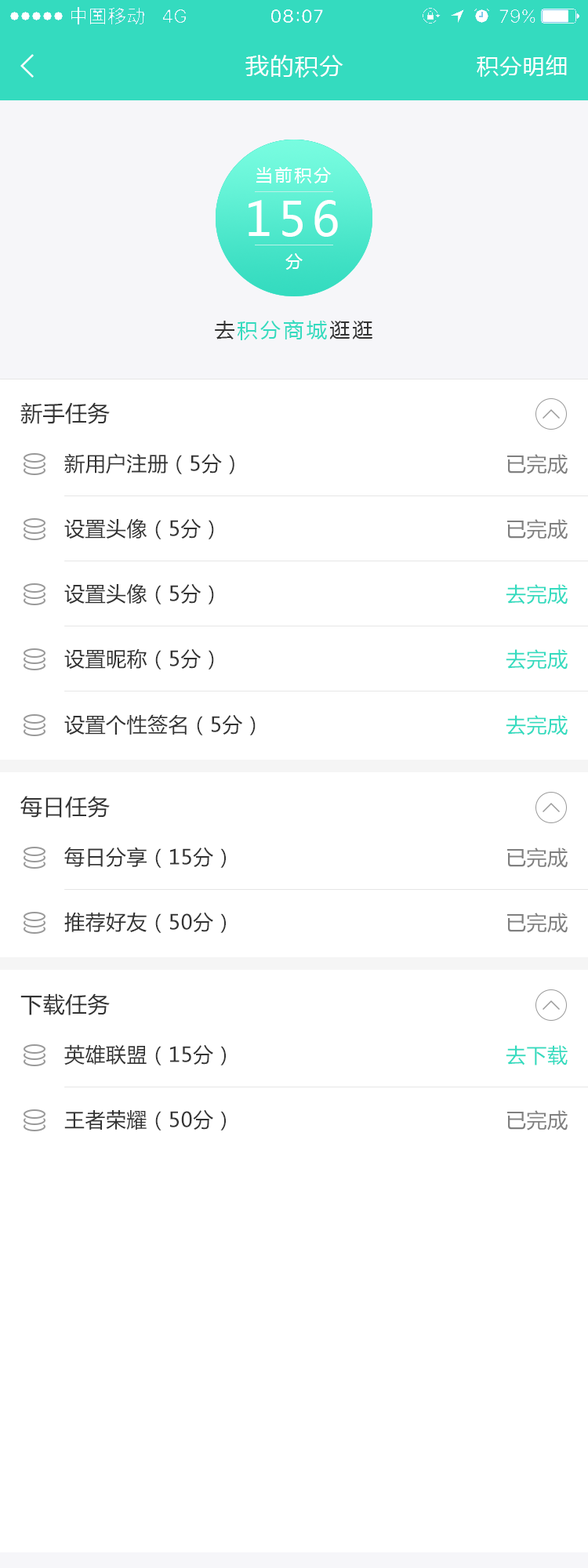
<style>
.page{position:relative;width:588px;height:1568px;background:#ffffff}
.page>*{position:absolute;margin:0}
.t1{font:23.5px "MicrosoftYaHei";letter-spacing:0.05em;color:#ffffff}
.t2{font:22px "MicrosoftYaHei";letter-spacing:0.05em;color:#ffffff}
.t3{font:17.2px "MicrosoftYaHei";letter-spacing:0.13em;color:#ffffff}
.t4{font:47px "MicrosoftYaHei";letter-spacing:0.13em;color:#ffffff}
.t5{font:20.4px "MicrosoftYaHei";letter-spacing:0.13em;color:#34dbbf}
.t6{font:20.4px "MicrosoftYaHei";letter-spacing:0.13em;color:#333333}
.t7{font:22px "MicrosoftYaHei";letter-spacing:0.02em;color:#333333}
.t8{font:20.4px "MicrosoftYaHei";letter-spacing:0.02em;color:#333333}
.t9{font:20.4px "MicrosoftYaHei";letter-spacing:0.02em;color:#808080}
.t10{font:20.4px "MicrosoftYaHei";letter-spacing:0.02em;color:#34dbbf}
</style>
<div class="page">
<p class="t1" style="left:245px;top:55px;width:98px;height:23px">我的积分</p>
<p class="t2" style="left:477px;top:55px;width:90px;height:22px">积分明细</p>
<p class="t3" style="left:256px;top:167px;width:76px;height:16px">当前积分</p>
<p class="t4" style="left:249px;top:200px;width:89px;height:37px">156</p>
<p class="t3" style="left:285px;top:253px;width:18px;height:17px">分</p>
<p class="t5" style="left:215px;top:320px;width:157px;height:20px"><span class="t6">去</span>积分商城<span class="t6">逛逛</span></p>
<p class="t7" style="left:20px;top:402px;width:90px;height:22px">新手任务</p>
<p class="t8" style="left:64px;top:453px;width:170px;height:21px">新用户注册（5分）</p>
<p class="t9" style="left:507px;top:454px;width:61px;height:20px">已完成</p>
<p class="t8" style="left:64px;top:518px;width:150px;height:21px">设置头像（5分）</p>
<p class="t9" style="left:507px;top:519px;width:61px;height:20px">已完成</p>
<p class="t8" style="left:64px;top:583px;width:150px;height:21px">设置头像（5分）</p>
<p class="t10" style="left:506px;top:584px;width:62px;height:20px">去完成</p>
<p class="t8" style="left:64px;top:648px;width:150px;height:22px">设置昵称（5分）</p>
<p class="t10" style="left:506px;top:649px;width:62px;height:21px">去完成</p>
<p class="t8" style="left:64px;top:714px;width:192px;height:21px">设置个性签名（5分）</p>
<p class="t10" style="left:506px;top:715px;width:62px;height:20px">去完成</p>
<p class="t7" style="left:20px;top:796px;width:90px;height:22px">每日任务</p>
<p class="t8" style="left:64px;top:847px;width:162px;height:21px">每日分享（15分）</p>
<p class="t9" style="left:507px;top:848px;width:61px;height:20px">已完成</p>
<p class="t8" style="left:64px;top:912px;width:162px;height:21px">推荐好友（50分）</p>
<p class="t9" style="left:507px;top:913px;width:61px;height:20px">已完成</p>
<p class="t7" style="left:20px;top:993px;width:90px;height:22px">下载任务</p>
<p class="t8" style="left:64px;top:1044px;width:162px;height:21px">英雄联盟（15分）</p>
<p class="t10" style="left:506px;top:1045px;width:62px;height:20px">去下载</p>
<p class="t8" style="left:64px;top:1109px;width:162px;height:22px">王者荣耀（50分）</p>
<p class="t9" style="left:507px;top:1110px;width:61px;height:21px">已完成</p>
</div>
